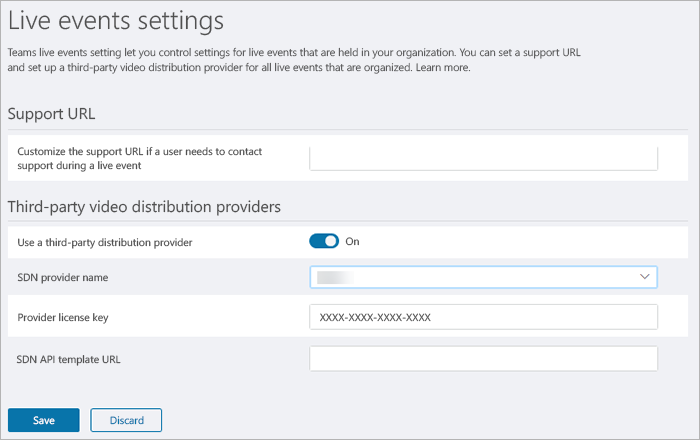
<style>
.page{position:relative;width:700px;height:440px;background:#f0f1f5}
.page>*{position:absolute;margin:0}
.t1{font:26.2px "SegoeUI-Semilight";color:#505050}
.t2{font:10.8px/14.9px "SegoeUI-Semilight";color:#505050}
.t3{font:15.7px "SegoeUI";color:#505050}
.t4{font:10.4px/14.1px "SegoeUI";color:#505050}
.t5{font:10.4px "SegoeUI";color:#505050}
.t6{font:10.4px "SegoeUI"}
.t7{font:10.4px "SegoeUI";color:#ffffff}
.t8{font:10.4px "SegoeUI";color:#0874aa}
</style>
<div class="page">
<p class="t1" style="left:9px;top:10px;width:215px;height:26px">Live events settings</p>
<p class="t2" style="left:7px;top:47px;width:574px;height:27px">Teams live events setting let you control settings for live events that are held in your organization. You can set a support URL<br>and set up a third-party video distribution provider for all live events that are organized. Learn more.</p>
<p class="t3" style="left:8px;top:107px;width:88px;height:16px">Support URL</p>
<p class="t4" style="left:17px;top:146px;width:245px;height:26px">Customize the support URL if a user needs to contact<br>support during a live event</p>
<p class="t3" style="left:7px;top:200px;width:274px;height:16px">Third-party video distribution providers</p>
<p class="t5" style="left:18px;top:238px;width:175px;height:11px">Use a third-party distribution provider</p>
<p class="t5" style="left:345px;top:237px;width:14px;height:9px">On</p>
<p class="t5" style="left:17px;top:273px;width:91px;height:11px">SDN provider name</p>
<p class="t5" style="left:18px;top:313px;width:91px;height:11px">Provider license key</p>
<p class="t6" style="left:320px;top:313px;width:111px;height:9px">XXXX-XXXX-XXXX-XXXX</p>
<p class="t5" style="left:16px;top:355px;width:105px;height:11px">SDN API template URL</p>
<p class="t7" style="left:33px;top:416px;width:22px;height:9px">Save</p>
<p class="t8" style="left:110px;top:416px;width:34px;height:9px">Discard</p>
</div>
